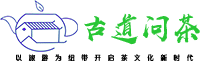
<style>
.page{position:relative;width:200px;height:61px;background:#ffffff}
.page>*{position:absolute;margin:0}
.t1{font:30.6px "HYShangWeiShouShuW-Regular";color:#28c634}
.t2{font:6.5px "HGZYT_CNKI";letter-spacing:1.04em;color:#000000}
</style>
<div class="page">
<p class="t1" style="left:84px;top:13px;width:116px;height:32px">古道问茶</p>
<p class="t2" style="left:16px;top:54px;width:178px;height:8px">以旅游为纽带开启茶文化新时代</p>
</div>
